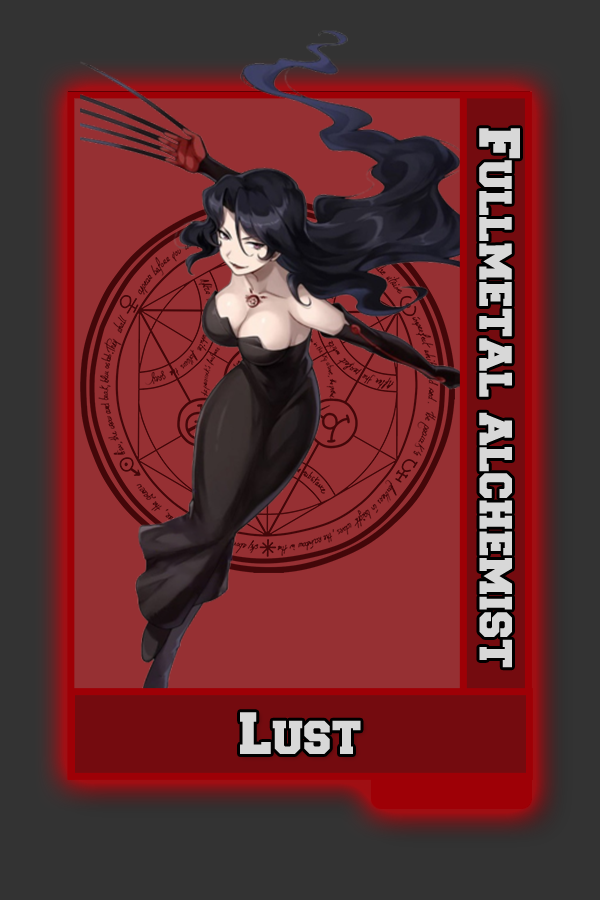
<style>
.page{position:relative;width:600px;height:900px;background:#333333}
.page>*{position:absolute;margin:0}
.t1{font:48.8px "Freshman";color:#d8d8d8}
.t2{font:50px "Freshman";color:#d8d8d8}
</style>
<div class="page">
<p class="t1" style="left:479px;top:128px;width:41px;height:540px;rotate:90deg">Fullmetal alchemist</p>
<p class="t2" style="left:239px;top:712px;width:122px;height:42px">Lust</p>
</div>
